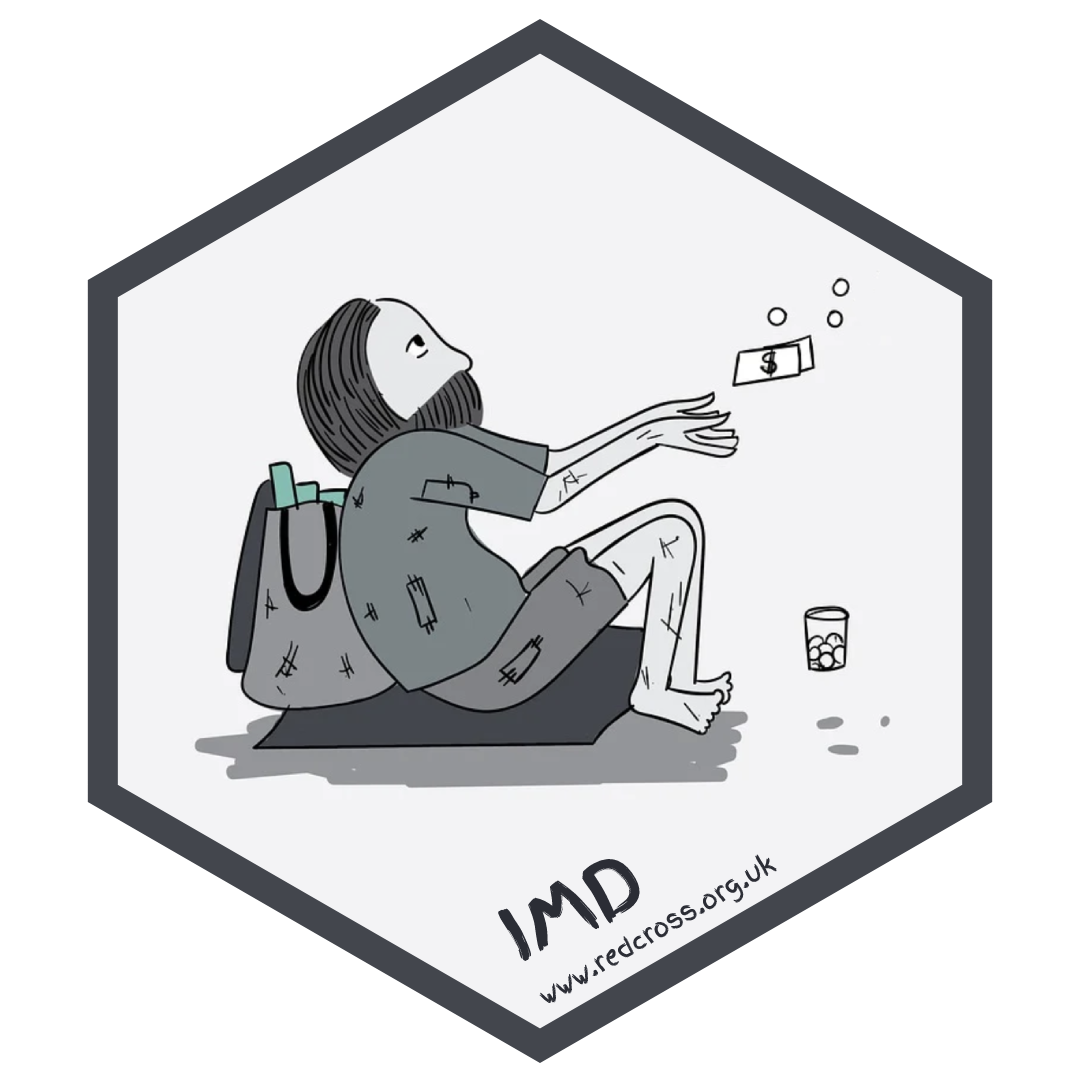
<style>
.page{position:relative;width:1080px;height:1080px;background:#ffffff}
.page>*{position:absolute;margin:0}
.t1{font:25px "FingerPaint-Regular";color:#2b2d35}
.t2{font:75px "FingerPaint-Regular";color:#2b2d35;font-weight:bold}
</style>
<div class="page">
<p class="t1" style="left:539px;top:854px;width:238px;height:149px;rotate:-30deg">www.redcross.org.uk</p>
<p class="t2" style="left:498px;top:858px;width:144px;height:103px;rotate:-29deg">IMD</p>
</div>
